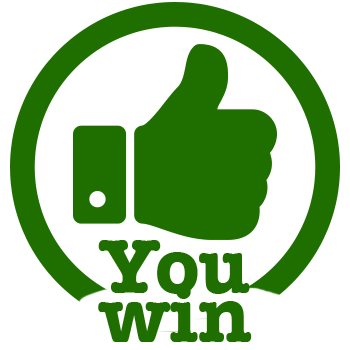
<style>
.page{position:relative;width:350px;height:350px;background:#ffffff}
.page>*{position:absolute;margin:0}
.t1{font:79px/49px "AmericanTypewriter-Bold";color:#1f6f00}
</style>
<div class="page">
<p class="t1" style="left:98px;top:240px;width:154px;height:102px;text-align:center">You<br>win</p>
</div>
